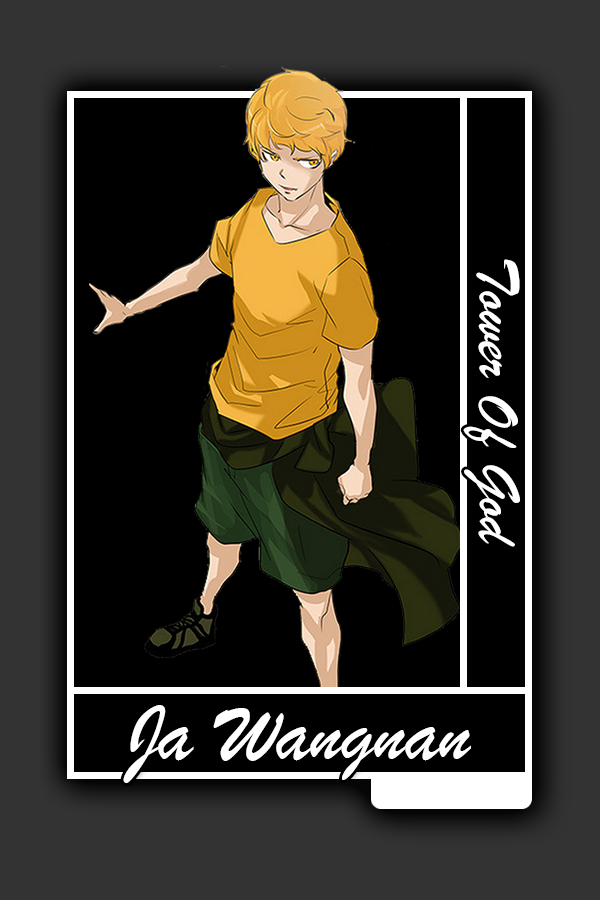
<style>
.page{position:relative;width:600px;height:900px;background:#000000}
.page>*{position:absolute;margin:0}
.t1{font:61.5px "BrushScriptMT";color:#ffffff}
.t2{font:84.8px "BrushScriptMT";color:#ffffff}
</style>
<div class="page">
<p class="t1" style="left:463px;top:259px;width:57px;height:288px;rotate:90deg">Tower Of God</p>
<p class="t2" style="left:123px;top:705px;width:348px;height:78px">Ja Wangnan</p>
</div>
